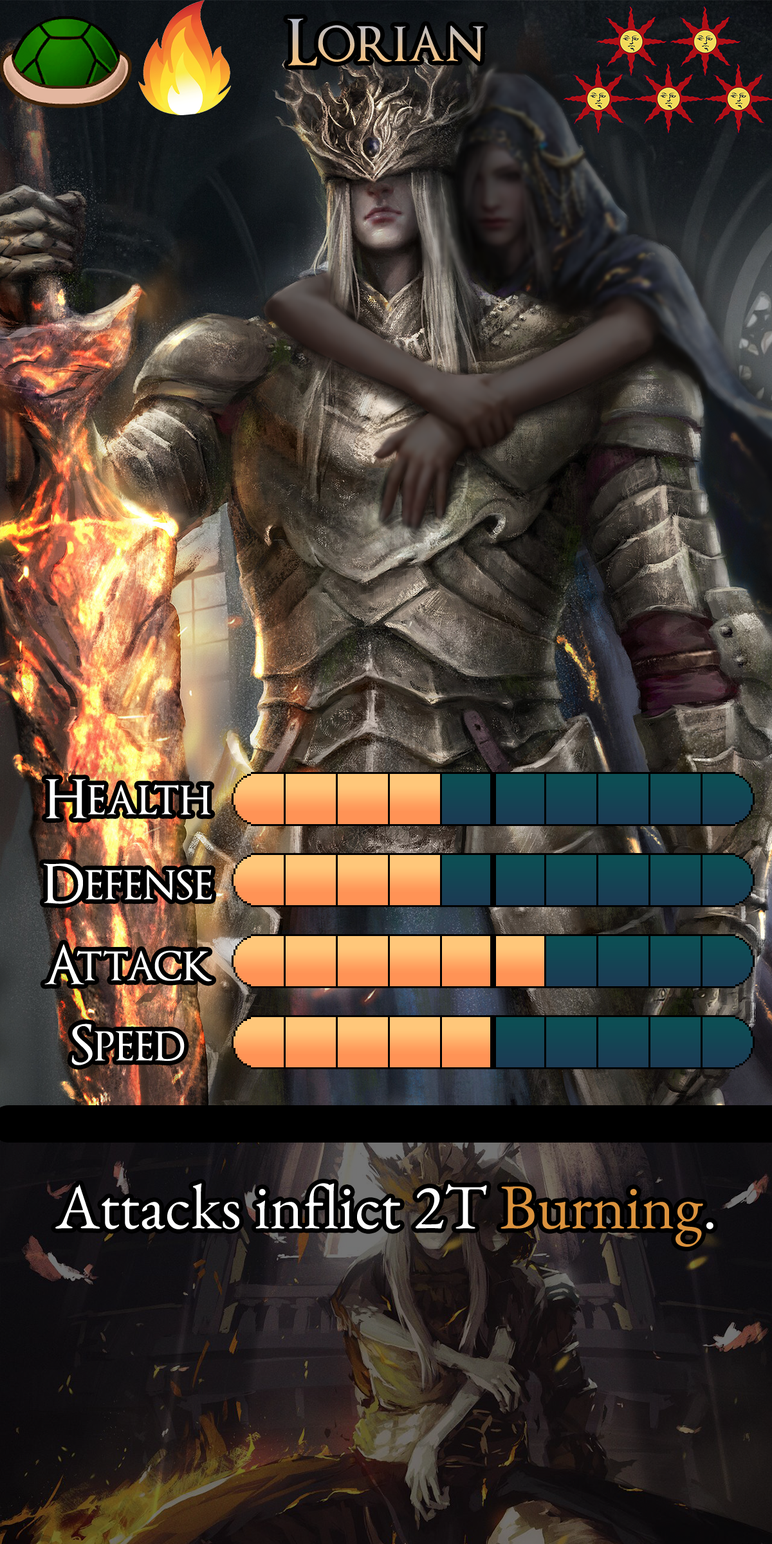
<style>
.page{position:relative;width:772px;height:1544px}
.page>*{position:absolute;margin:0}
.t1{font:108.1px "OptimusPrinceps"}
.t2{font:90.7px "OptimusPrinceps";color:#ffffff}
.t3{font:109.4px "EBGaramond-Regular";color:#ffffff}
.t4{font:109.4px "EBGaramond-Regular";color:#db923d}
</style>
<div class="page">
<p class="t1" style="left:288px;top:19px;width:196px;height:47px">Lorian</p>
<p class="t2" style="left:46px;top:779px;width:165px;height:39px">Health</p>
<p class="t2" style="left:43px;top:864px;width:169px;height:40px">Defense</p>
<p class="t2" style="left:44px;top:944px;width:168px;height:41px">Attack</p>
<p class="t2" style="left:71px;top:1024px;width:114px;height:42px">Speed</p>
<p class="t3" style="left:55px;top:1183px;width:659px;height:64px">Attacks inflict 2T <span class="t4">Burning</span>.</p>
</div>
